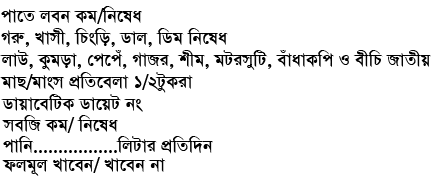
<style>
.page{position:relative;width:444px;height:180px;background:#ffffff}
.page>*{position:absolute;margin:0}
.t1{font:20px "SutonnyMJBold";color:#000000}
</style>
<div class="page">
<p class="t1" style="left:1px;top:6px;width:141px;height:18px">cv‡Z jeb Kg/wb‡la</p>
<p class="t1" style="left:1px;top:28px;width:227px;height:19px">Miæ, Lvmx, wPswo, Wvj, wWg wb‡la</p>
<p class="t1" style="left:0px;top:50px;width:431px;height:21px">jvD, Kzgov, †c‡cu, MvRi, kxg, gUimywU, euvavKwc I exwP RvZxq</p>
<p class="t1" style="left:0px;top:72px;width:193px;height:21px">gvQ/gvsm cÖwZ‡ejv 1/2UzKiv</p>
<p class="t1" style="left:1px;top:94px;width:142px;height:18px">Wvqv‡ewUK Wv‡qU bs</p>
<p class="t1" style="left:2px;top:115px;width:116px;height:18px">mewR Kg/ wb‡la</p>
<p class="t1" style="left:3px;top:136px;width:210px;height:18px">cvwb.................wjUvi cÖwZw`b</p>
<p class="t1" style="left:2px;top:157px;width:164px;height:19px">djg~j Lv‡eb/ Lv‡eb bv</p>
</div>
